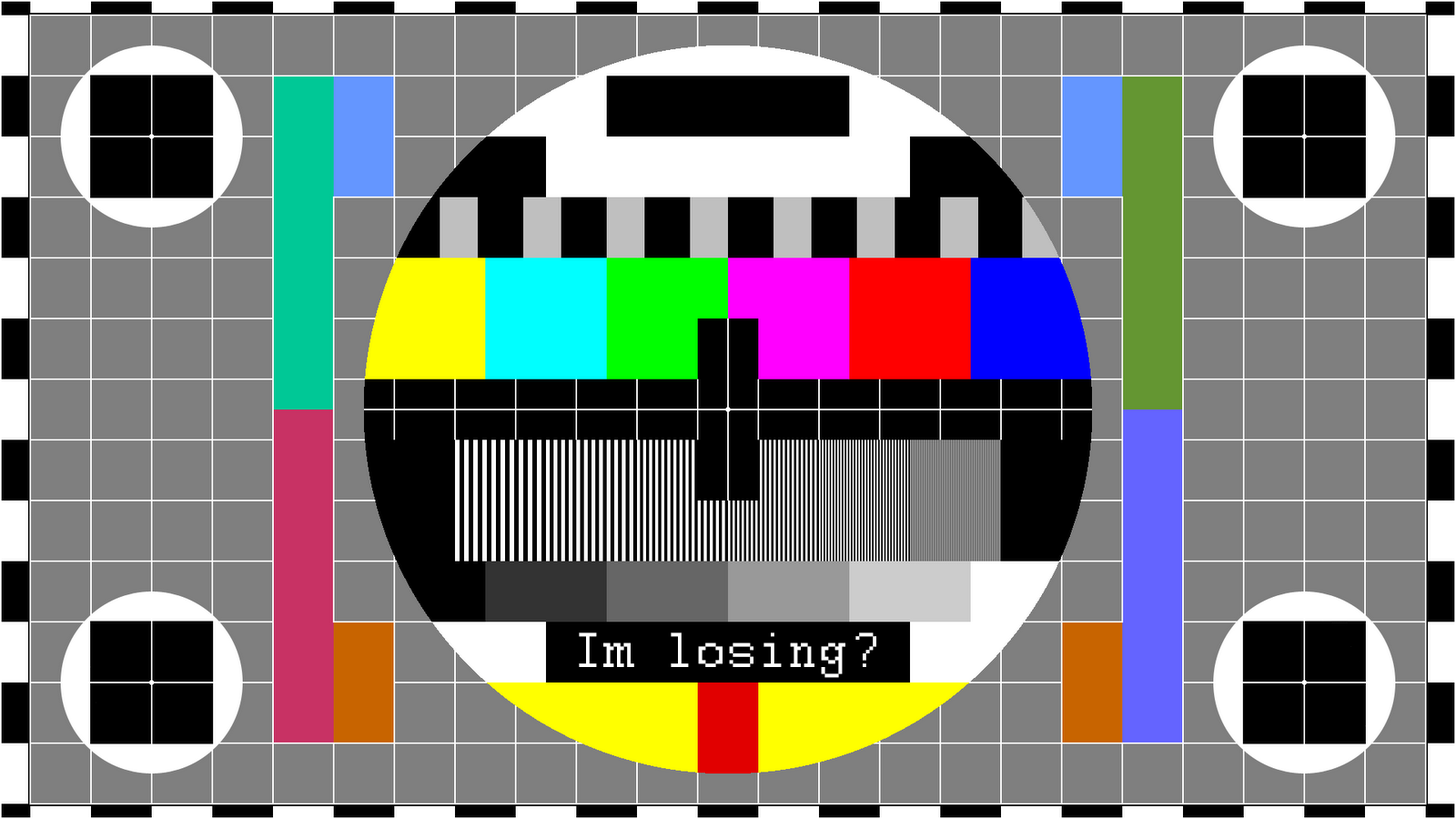
<style>
.page{position:relative;width:1456px;height:819px;background:#7f7f7f}
.page>*{position:absolute;margin:0}
.t1{font:54.6px "Courier";color:#fefefe}
</style>
<div class="page">
<p class="t1" style="left:579px;top:632px;width:297px;height:46px">Im losing?</p>
</div>
